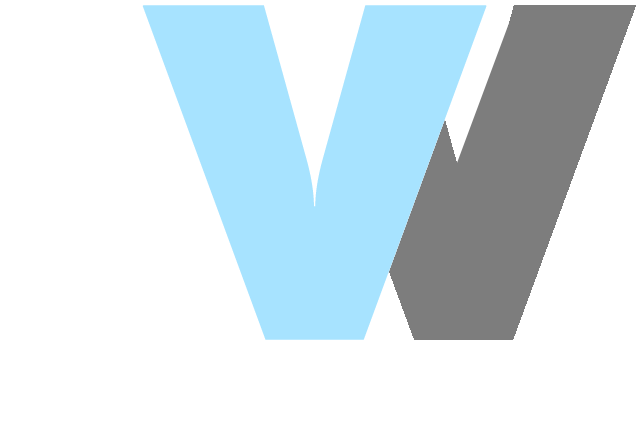
<style>
.page{position:relative;width:641px;height:447px;background:#ffffff}
.page>*{position:absolute;margin:0}
.t1{font:441.8px "Futura-ExtraBold";color:#a7e3ff;font-weight:bold;scale:0.95 1}
.t2{font:524.8px "Futura-ExtraBold";color:#ffffff;font-weight:bold;scale:0.95 1}
</style>
<div class="page">
<p class="t1" style="left:142px;top:5px;width:345px;height:335px">V</p>
<p class="t2" style="left:3px;top:9px;width:232px;height:433px;rotate:-21deg">J</p>
</div>
